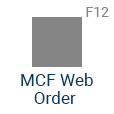
<style>
.page{position:relative;width:114px;height:114px;background:#ffffff}
.page>*{position:absolute;margin:0}
.t1{font:14px "Roboto-Regular";color:#858585}
.t2{font:17.2px/17.2px "Roboto-Regular";color:#003b64}
</style>
<div class="page">
<p class="t1" style="left:86px;top:7px;width:23px;height:10px">F12</p>
<p class="t2" style="left:21px;top:73px;width:72px;height:31px;text-align:center">MCF Web<br>Order</p>
</div>
